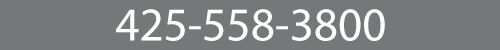
<style>
.page{position:relative;width:500px;height:50px;background:#767779}
.page>*{position:absolute;margin:0}
.t1{font:47.2px "MyriadPro-Regular";color:#ffffff}
</style>
<div class="page">
<p class="t1" style="left:116px;top:9px;width:269px;height:32px">425-558-3800</p>
</div>
